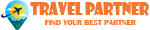
<style>
.page{position:relative;width:150px;height:30px;background:#ffffff}
.page>*{position:absolute;margin:0}
.t1{font:16.9px "ShowcardGothic-Reg";letter-spacing:-0.025em;color:#f3772f;scale:0.88 1}
.t2{font:8.2px "BritannicBold";letter-spacing:-0.025em;color:#f3772f}
</style>
<div class="page">
<p class="t1" style="left:30px;top:2px;width:119px;height:14px">Travel Partner</p>
<p class="t2" style="left:45px;top:20px;width:91px;height:5px">FIND YOUR BEST PARTNER</p>
</div>
